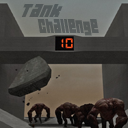
<style>
.page{position:relative;width:128px;height:128px}
.page>*{position:absolute;margin:0}
.t1{font:18px "04b19";color:#535959;scale:0.97 1}
.t2{font:18px "04b19";color:#565a5a;scale:0.73 1}
</style>
<div class="page">
<p class="t1" style="left:21px;top:4px;width:42px;height:13px">Tank</p>
<p class="t2" style="left:37px;top:19px;width:62px;height:17px">Challenge</p>
</div>
